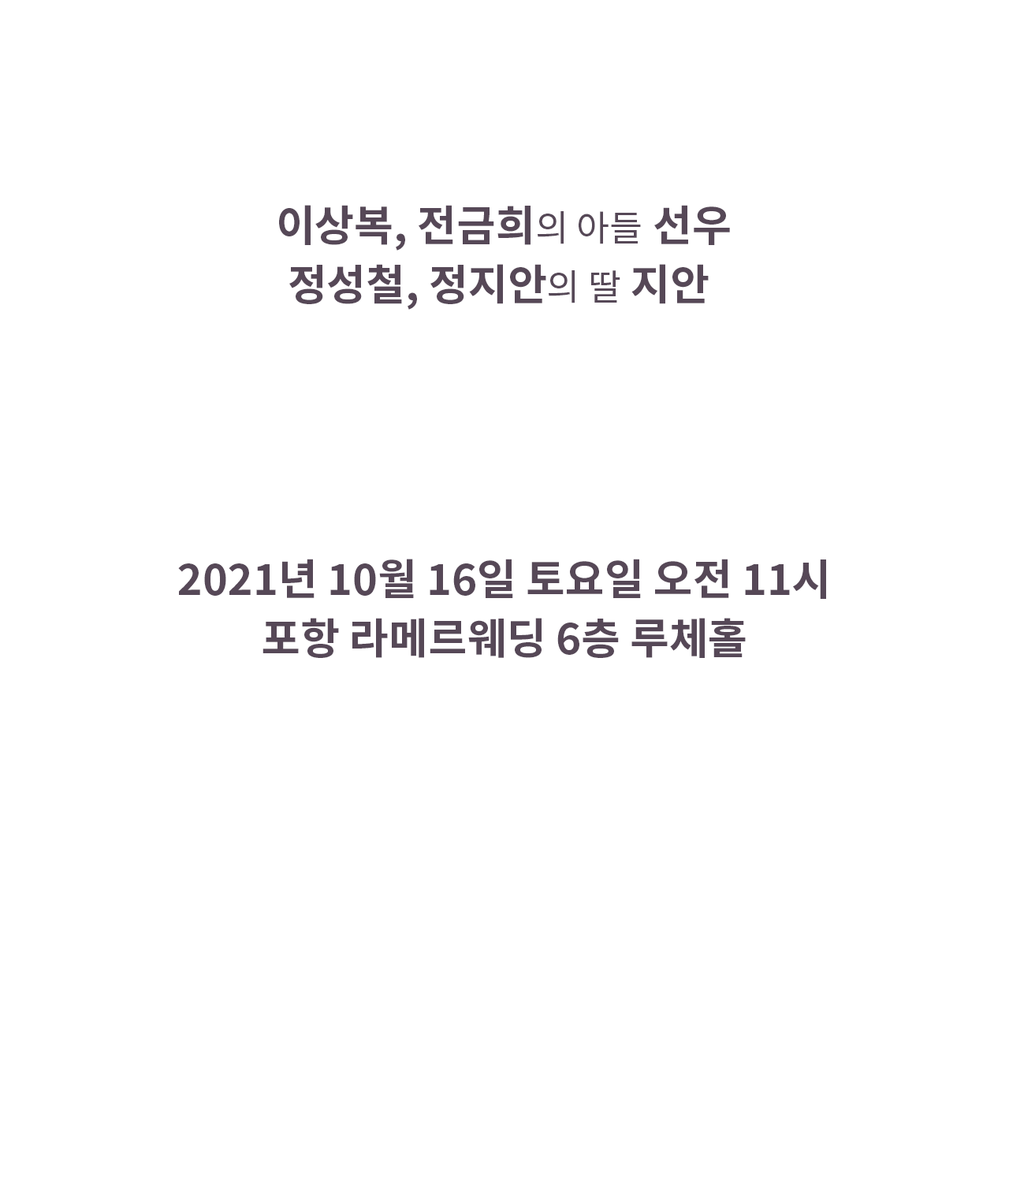
<style>
.page{position:relative;width:1009px;height:1182px;background:#ffffff}
.page>*{position:absolute;margin:0}
.t1{font:42.7px/59.1px "NotoSansKR-Bold";color:#564857}
.t2{font:36.1px/59.1px "NotoSansKR-Regular";color:#564857}
</style>
<div class="page">
<p class="t1" style="left:279px;top:205px;width:451px;height:105px;text-align:center">이상복, 전금희<span class="t2">의　아들 </span>선우<br>정성철, 정지안<span class="t2">의 딸 </span>지안</p>
<p class="t1" style="left:178px;top:559px;width:648px;height:99px;text-align:center">2021년 10월 16일 토요일 오전 11시<br>포항 라메르웨딩 6층 루체홀</p>
</div>
